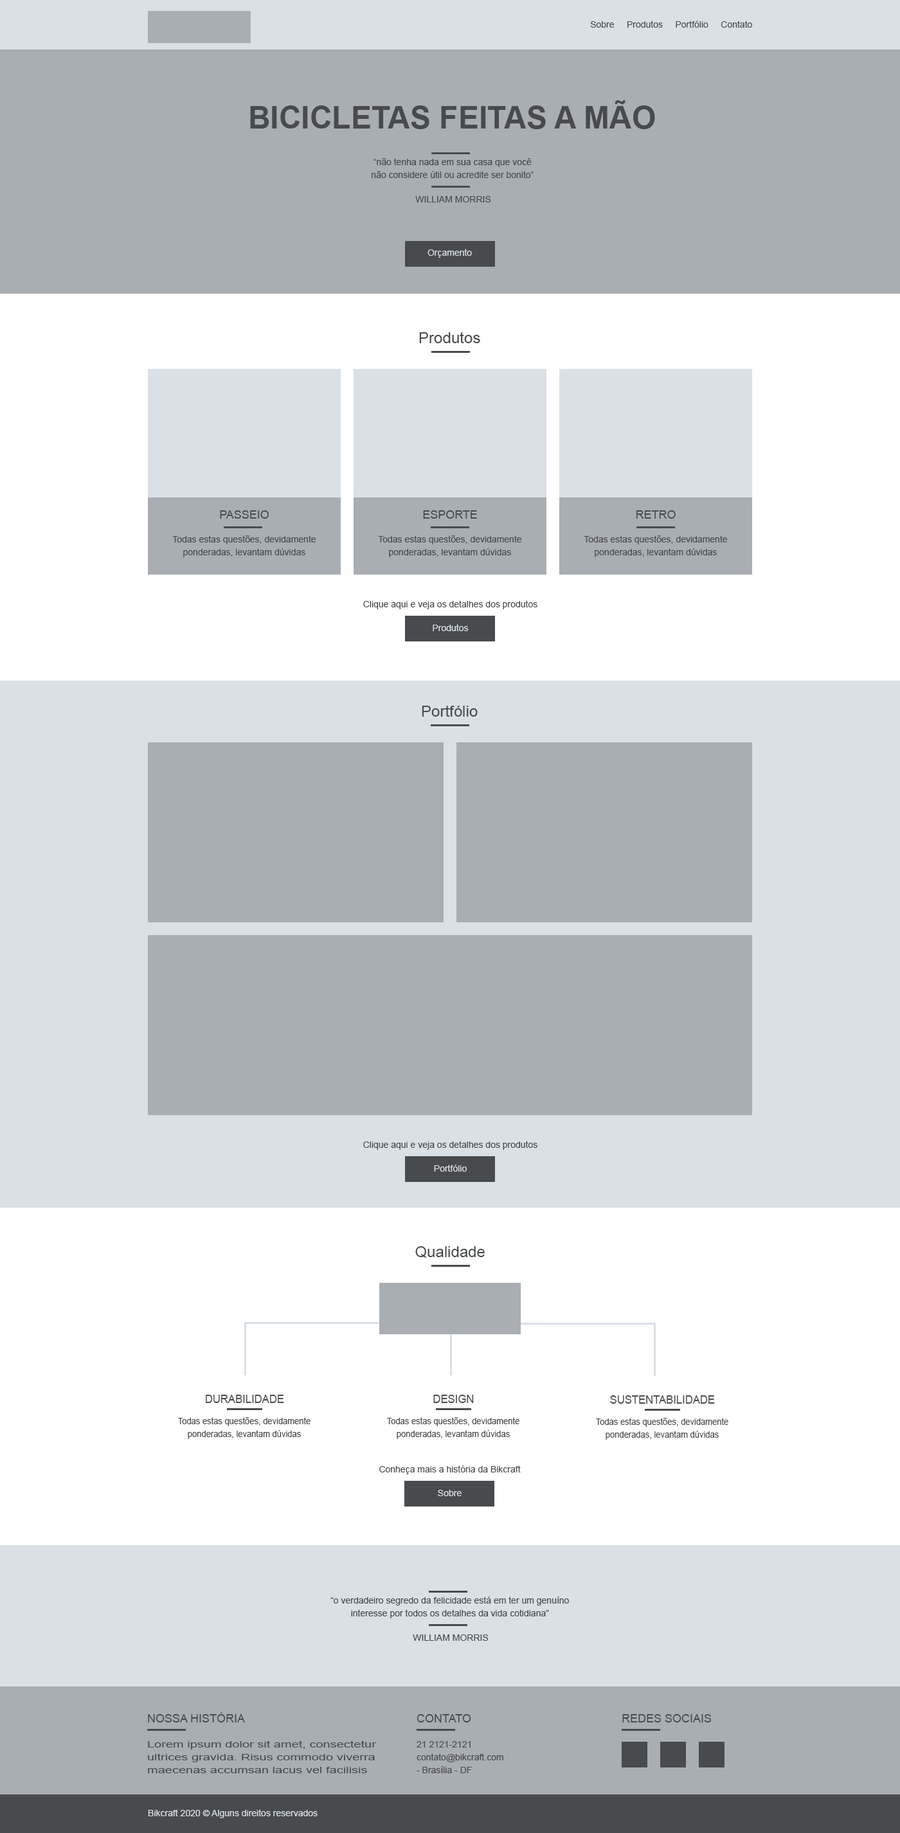
<style>
.page{position:relative;width:900px;height:1833px;background:#a9aeb3}
.page>*{position:absolute;margin:0}
.t1{font:9px "ArialMT";color:#484b4d}
.t2{font:30.9px "Arial-BoldMT";color:#484b4d;text-transform:uppercase}
.t3{font:9px/12.9px "ArialMT";color:#484b4d}
.t4{font:9px "ArialMT";color:#d9e0e6}
.t5{font:15.4px "ArialMT";color:#484b4d}
.t6{font:11.6px "ArialMT";color:#484b4d;text-transform:uppercase}
.t7{font:11.7px "ArialMT";color:#484b4d;text-transform:uppercase;scale:0.92 1}
.t8{font:9.1px/12.9px "ArialMT";color:#484b4d;scale:0.92 1}
.t9{font:9px/12.9px "ArialMT";color:#484b4d;scale:1.43 1}
</style>
<div class="page">
<p class="t1" style="left:590px;top:21px;width:162px;height:7px">Sobre     Produtos     Portfólio     Contato</p>
<p class="t2" style="left:250px;top:100px;width:405px;height:29px">Bicicletas feitas a mão</p>
<p class="t3" style="left:372px;top:158px;width:162px;height:20px;text-align:center">“não tenha nada em sua casa que você<br>não considere útil ou acredite ser bonito”</p>
<p class="t1" style="left:415px;top:196px;width:76px;height:7px">WILLIAM MORRIS</p>
<p class="t4" style="left:428px;top:249px;width:44px;height:9px">Orçamento</p>
<p class="t5" style="left:419px;top:332px;width:61px;height:11px">Produtos</p>
<p class="t6" style="left:220px;top:510px;width:49px;height:9px">PASSEIO</p>
<p class="t6" style="left:423px;top:510px;width:54px;height:9px">ESPORTE</p>
<p class="t6" style="left:636px;top:510px;width:40px;height:9px">RETRO</p>
<p class="t3" style="left:172px;top:536px;width:144px;height:21px;text-align:center">Todas estas questões, devidamente ponderadas, levantam dúvidas</p>
<p class="t3" style="left:378px;top:536px;width:143px;height:21px;text-align:center">Todas estas questões, devidamente ponderadas, levantam dúvidas</p>
<p class="t3" style="left:584px;top:536px;width:143px;height:21px;text-align:center">Todas estas questões, devidamente ponderadas, levantam dúvidas</p>
<p class="t1" style="left:363px;top:600px;width:174px;height:9px">Clique aqui e veja os detalhes dos produtos</p>
<p class="t4" style="left:433px;top:624px;width:36px;height:7px">Produtos</p>
<p class="t5" style="left:422px;top:705px;width:56px;height:12px">Portfólio</p>
<p class="t1" style="left:363px;top:1141px;width:174px;height:9px">Clique aqui e veja os detalhes dos produtos</p>
<p class="t4" style="left:434px;top:1165px;width:33px;height:7px">Portfólio</p>
<p class="t5" style="left:415px;top:1246px;width:70px;height:12px">Qualidade</p>
<p class="t7" style="left:206px;top:1395px;width:78px;height:8px">Durabilidade</p>
<p class="t7" style="left:433px;top:1395px;width:41px;height:8px">design</p>
<p class="t7" style="left:610px;top:1396px;width:105px;height:8px">sustentabilidade</p>
<p class="t8" style="left:177px;top:1418px;width:133px;height:21px;text-align:center">Todas estas questões, devidamente ponderadas, levantam dúvidas</p>
<p class="t8" style="left:386px;top:1418px;width:133px;height:21px;text-align:center">Todas estas questões, devidamente ponderadas, levantam dúvidas</p>
<p class="t8" style="left:595px;top:1418px;width:133px;height:22px;text-align:center">Todas estas questões, devidamente ponderadas, levantam dúvidas</p>
<p class="t1" style="left:379px;top:1466px;width:142px;height:9px">Conheça mais a história da Bikcraft</p>
<p class="t4" style="left:438px;top:1490px;width:24px;height:7px">Sobre</p>
<p class="t3" style="left:330px;top:1597px;width:239px;height:22px;text-align:center">“o verdadeiro segredo da felicidade está em ter um genuíno <br>interesse por todos os detalhes da vida cotidiana”</p>
<p class="t1" style="left:413px;top:1635px;width:76px;height:6px">WILLIAM MORRIS</p>
<p class="t6" style="left:148px;top:1713px;width:97px;height:10px">Nossa História</p>
<p class="t6" style="left:417px;top:1715px;width:54px;height:8px">contato</p>
<p class="t6" style="left:622px;top:1715px;width:90px;height:8px">redes sociais</p>
<p class="t9" style="left:148px;top:1741px;width:229px;height:33px">Lorem ipsum dolor sit amet, consectetur ultrices gravida. Risus commodo viverra maecenas accumsan lacus vel facilisis</p>
<p class="t3" style="left:417px;top:1742px;width:86px;height:32px">21 2121-2121<br>contato@bikcraft.com<br>- Brasília - DF</p>
<p class="t4" style="left:148px;top:1810px;width:170px;height:9px">Bikcraft 2020 © Alguns direitos reservados</p>
</div>
